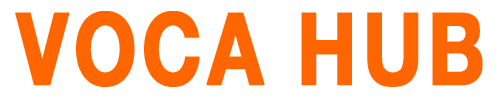
<style>
.page{position:relative;width:500px;height:100px;background:#ffffff}
.page>*{position:absolute;margin:0}
.t1{font:100px "Helvetica75-Bold";letter-spacing:0.05em;color:#ff6600;font-weight:bold;scale:0.8 1}
</style>
<div class="page">
<p class="t1" style="left:15px;top:11px;width:468px;height:76px">VOCA HUB</p>
</div>
